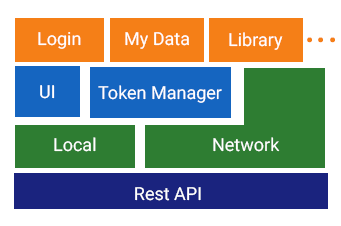
<style>
.page{position:relative;width:341px;height:226px;background:#ffffff}
.page>*{position:absolute;margin:0}
.t1{font:18px "Roboto-Regular";color:#ffffff}
.t2{font:44.4px "Roboto-Regular";color:#f57f17}
</style>
<div class="page">
<p class="t1" style="left:38px;top:32px;width:43px;height:17px">Login</p>
<p class="t1" style="left:125px;top:32px;width:64px;height:17px">My Data</p>
<p class="t1" style="left:229px;top:32px;width:54px;height:18px">Library</p>
<p class="t2" style="left:307px;top:37px;width:28px;height:6px">...</p>
<p class="t1" style="left:40px;top:85px;width:15px;height:14px">UI</p>
<p class="t1" style="left:98px;top:85px;width:124px;height:18px">Token Manager</p>
<p class="t1" style="left:54px;top:137px;width:42px;height:15px">Local</p>
<p class="t1" style="left:213px;top:137px;width:67px;height:15px">Network</p>
<p class="t1" style="left:135px;top:187px;width:66px;height:14px">Rest API</p>
</div>
